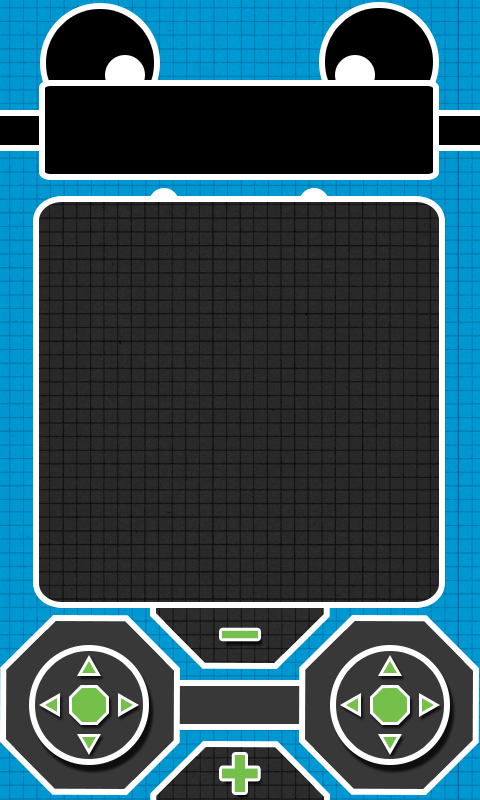
<style>
.page{position:relative;width:480px;height:800px;background:#282829}
.page>*{position:absolute;margin:0}
.t1{font:72px "STHupo";color:#74c04a}
</style>
<div class="page">
<p class="t1" style="left:222px;top:630px;width:36px;height:9px">_</p>
<p class="t1" style="left:222px;top:755px;width:36px;height:37px">+</p>
</div>
